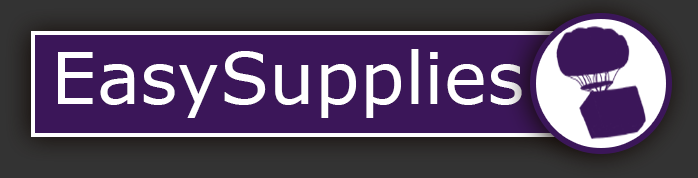
<style>
.page{position:relative;width:698px;height:178px;background:#3b1659}
.page>*{position:absolute;margin:0}
.t1{font:72px "Verdana";color:#ffffff}
</style>
<div class="page">
<p class="t1" style="left:58px;top:49px;width:464px;height:69px">EasySupplies</p>
</div>
